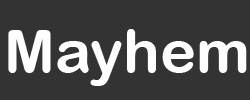
<style>
.page{position:relative;width:250px;height:100px;background:#333333}
.page>*{position:absolute;margin:0}
.t1{font:61px "ArialRoundedMTBold";color:#fffefe}
</style>
<div class="page">
<p class="t1" style="left:8px;top:29px;width:239px;height:57px">Mayhem</p>
</div>
